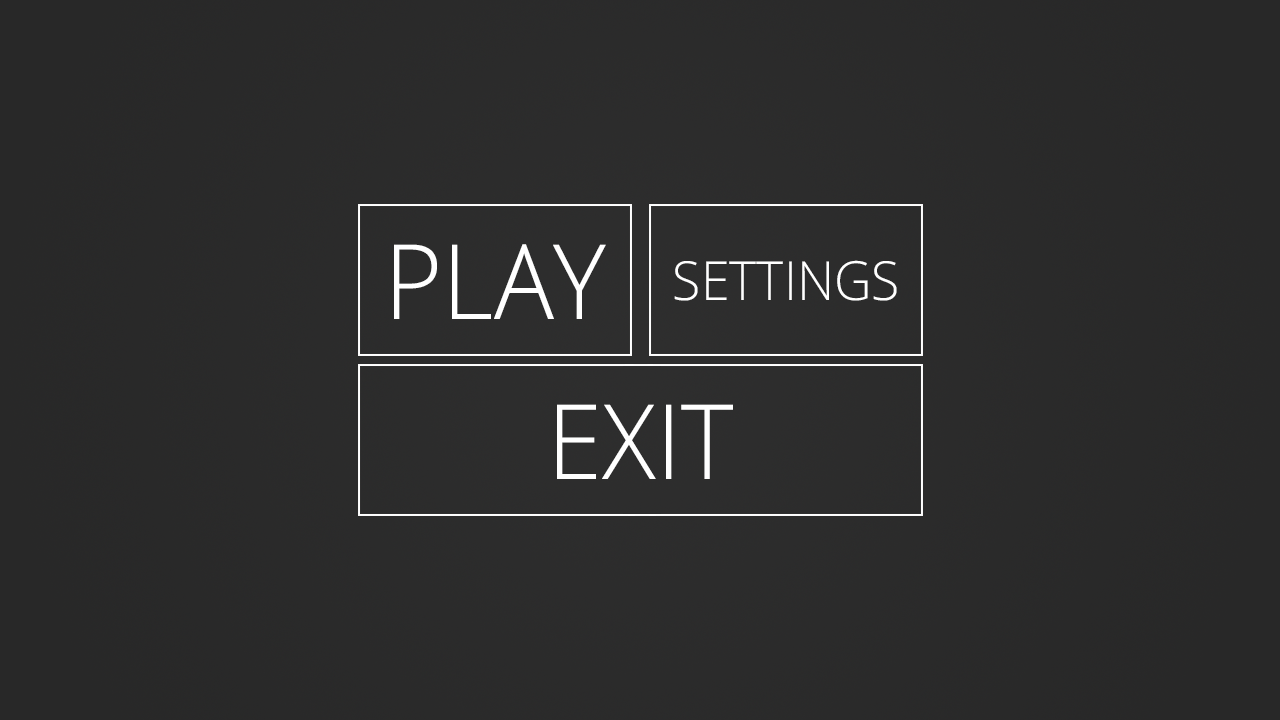
<style>
.page{position:relative;width:1280px;height:720px}
.page>*{position:absolute;margin:0}
.t1{font:104px "OpenSans-Light";color:#ffffff;scale:0.96 1}
.t2{font:54px "OpenSans-Light";color:#ffffff;scale:0.96 1}
</style>
<div class="page">
<p class="t1" style="left:394px;top:244px;width:212px;height:75px">PLAY</p>
<p class="t2" style="left:674px;top:260px;width:223px;height:41px">SETTINGS</p>
<p class="t1" style="left:557px;top:404px;width:176px;height:75px">EXIT</p>
</div>
